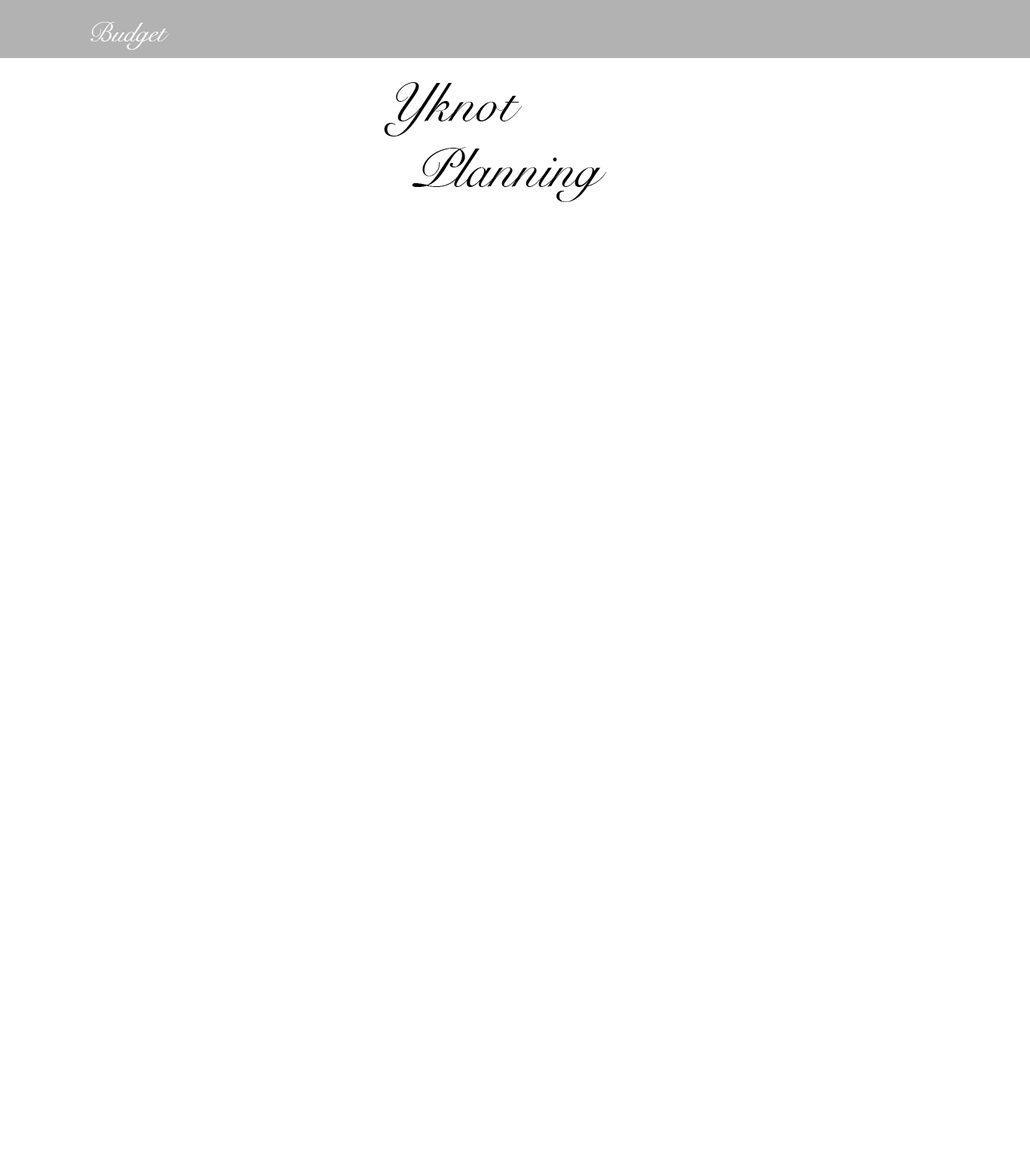
<style>
.page{position:relative;width:1030px;height:1158px;background:#ffffff}
.page>*{position:absolute;margin:0}
.t1{font:27.1px "SnellRoundhand";color:#ffffff}
.t2{font:54.3px "SnellRoundhand";color:#000000}
</style>
<div class="page">
<p class="t1" style="left:90px;top:22px;width:79px;height:28px">Budget</p>
<p class="t2" style="left:384px;top:82px;width:222px;height:120px">Yknot<br> Planning</p>
</div>
